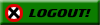
<style>
.page{position:relative;width:100px;height:25px;background:#0c7d00}
.page>*{position:absolute;margin:0}
.t1{font:17.9px "Motorwerk";color:#000000}
</style>
<div class="page">
<p class="t1" style="left:28px;top:9px;width:63px;height:9px">LOGOUT!</p>
</div>
